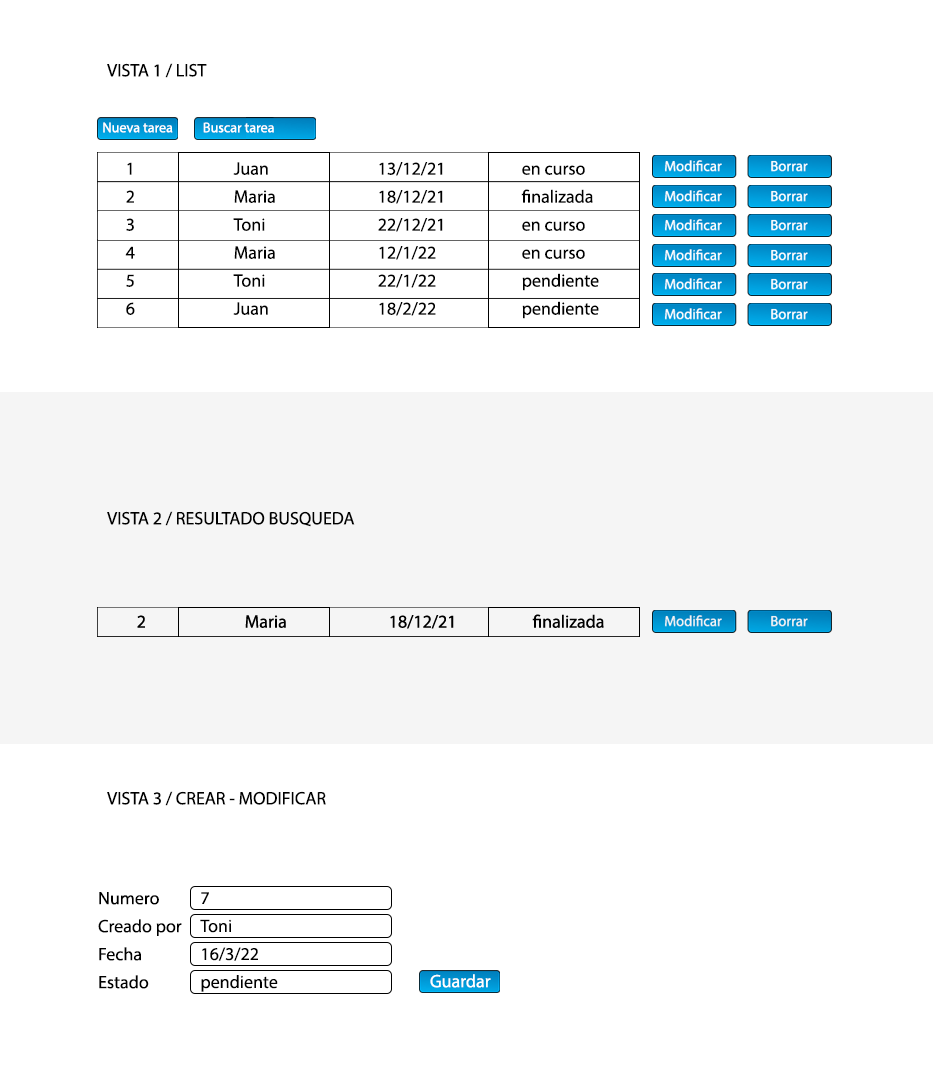
<style>
.page{position:relative;width:933px;height:1080px;background:#ffffff}
.page>*{position:absolute;margin:0}
.t1{font:18px/28px "MyriadPro-Regular";color:#000000}
.t2{font:14.1px "MyriadPro-Regular";color:#ffffff}
.t3{font:18px "MyriadPro-Regular";color:#ffffff}
</style>
<div class="page">
<p class="t1" style="left:107px;top:63px;width:248px;height:743px">VISTA 1 / LIST<br><br><br><br><br><br><br><br><br><br><br><br><br><br><br><br>VISTA 2 / RESULTADO BUSQUEDA<br><br><br><br><br><br><br><br><br><br>VISTA 3 / CREAR - MODIFICAR</p>
<p class="t2" style="left:103px;top:122px;width:171px;height:11px">Nueva tarea          Buscar tarea</p>
<p class="t1" style="left:125px;top:162px;width:474px;height:157px">1   Juan    13/12/21   en curso<br>2   Maria   18/12/21   finalizada<br>3   Toni    22/12/21   en curso<br>4   Maria   12/1/22   en curso<br>5   Toni    22/1/22   pendiente<br>6   Juan    18/2/22   pendiente</p>
<p class="t1" style="left:98px;top:892px;width:84px;height:97px">Numero<br>Creado por<br>Fecha<br>Estado</p>
<p class="t1" style="left:200px;top:892px;width:78px;height:100px">7   <br>Toni   <br>16/3/22   <br>pendiente</p>
<p class="t3" style="left:430px;top:974px;width:61px;height:14px">Guardar</p>
</div>
